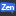
<style>
.page{position:relative;width:16px;height:16px;background:#333333}
.page>*{position:absolute;margin:0}
.t1{font:8px "MyriadPro-Regular";color:#ffffff}
</style>
<div class="page">
<p class="t1" style="left:1px;top:4px;width:13px;height:6px">Zen</p>
</div>
